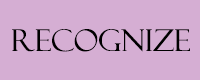
<style>
.page{position:relative;width:200px;height:80px;background:#d5aed3}
.page>*{position:absolute;margin:0}
.t1{font:30px "FelixTitlingMT";color:#000000}
</style>
<div class="page">
<p class="t1" style="left:12px;top:29px;width:178px;height:23px">RECOGNIZE</p>
</div>
